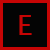
<style>
.page{position:relative;width:50px;height:50px;background:#040404}
.page>*{position:absolute;margin:0}
.t1{font:27.6px "LucidaGrande";color:#c70505}
</style>
<div class="page">
<p class="t1" style="left:19px;top:15px;width:13px;height:20px">E</p>
</div>
